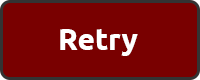
<style>
.page{position:relative;width:200px;height:80px;background:#790000}
.page>*{position:absolute;margin:0}
.t1{font:30px "Ubuntu-Bold";color:#ffffff}
</style>
<div class="page">
<p class="t1" style="left:60px;top:29px;width:78px;height:27px">Retry</p>
</div>
